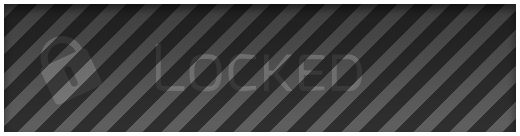
<style>
.page{position:relative;width:520px;height:136px}
.page>*{position:absolute;margin:0}
.t1{font:64px "Exo-Regular";font-variant:small-caps}
</style>
<div class="page">
<p class="t1" style="left:156px;top:44px;width:206px;height:48px">Locked</p>
</div>
